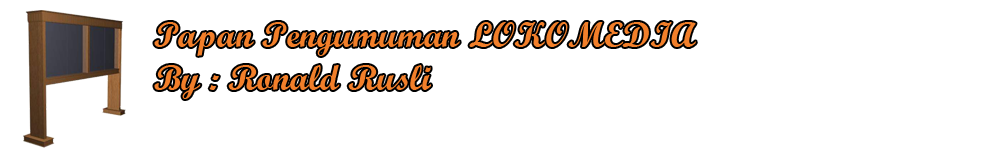
<style>
.page{position:relative;width:1000px;height:150px;background:#ffffff}
.page>*{position:absolute;margin:0}
.t1{font:36px "ScriptMTBold";color:#f27f2a}
</style>
<div class="page">
<p class="t1" style="left:154px;top:22px;width:542px;height:77px">Papan Pengumuman LOKOMEDIA<br>By : Ronald Rusli</p>
</div>
